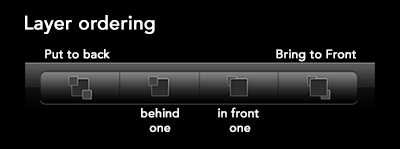
<style>
.page{position:relative;width:400px;height:149px;background:#000000}
.page>*{position:absolute;margin:0}
.t1{font:19px "Avenir-Medium";color:#ffffff;font-weight:bold}
.t2{font:12px "Avenir-Medium";color:#ffffff;font-weight:bold}
</style>
<div class="page">
<p class="t1" style="left:25px;top:15px;width:130px;height:19px">Layer ordering</p>
<p class="t2" style="left:45px;top:49px;width:65px;height:10px">Put to back</p>
<p class="t2" style="left:276px;top:49px;width:80px;height:13px">Bring to Front</p>
<p class="t2" style="left:141px;top:108px;width:38px;height:24px;text-align:center">behind<br>one</p>
<p class="t2" style="left:218px;top:107px;width:41px;height:25px;text-align:center">in front <br>one</p>
</div>
